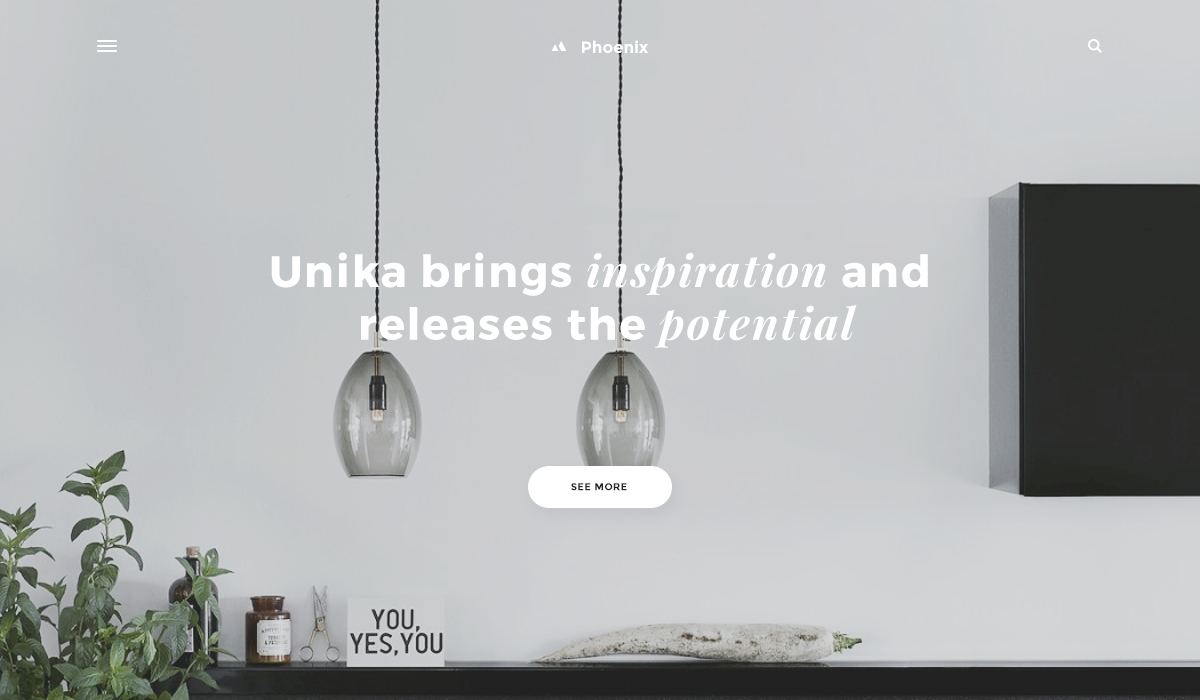
<style>
.page{position:relative;width:1200px;height:700px}
.page>*{position:absolute;margin:0}
.t1{font:16.4px "Montserrat-Bold";color:#ffffff}
.t2{font:44px "Montserrat-Bold";letter-spacing:0.04em;color:#ffffff}
.t3{font:44px "PlayfairDisplay-BoldItalic";letter-spacing:0.04em;color:#ffffff}
.t4{font:10px "Montserrat-Bold";letter-spacing:0.04em;color:#242526;text-transform:uppercase}
</style>
<div class="page">
<p class="t1" style="left:582px;top:40px;width:66px;height:13px">Phoenix</p>
<p class="t2" style="left:271px;top:252px;width:657px;height:96px;text-align:center">Unika brings <span class="t3">inspiration</span> and <br>releases the <span class="t3">potential</span></p>
<p class="t4" style="left:571px;top:483px;width:56px;height:8px">see more</p>
</div>
